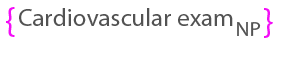
<style>
.page{position:relative;width:300px;height:60px;background:#ffffff}
.page>*{position:absolute;margin:0}
.t1{font:37.5px "MyriadPro-Regular";color:#f30df6}
.t2{font:25px "MyriadPro-Regular";color:#525252}
.t3{font:20.8px "MyriadPro-Regular";color:#525252}
</style>
<div class="page">
<p class="t1" style="left:6px;top:7px;width:9px;height:30px">{</p>
<p class="t2" style="left:19px;top:8px;width:214px;height:18px">Cardiovascular exam</p>
<p class="t1" style="left:264px;top:8px;width:9px;height:30px">}</p>
<p class="t3" style="left:237px;top:22px;width:24px;height:14px">NP</p>
</div>
